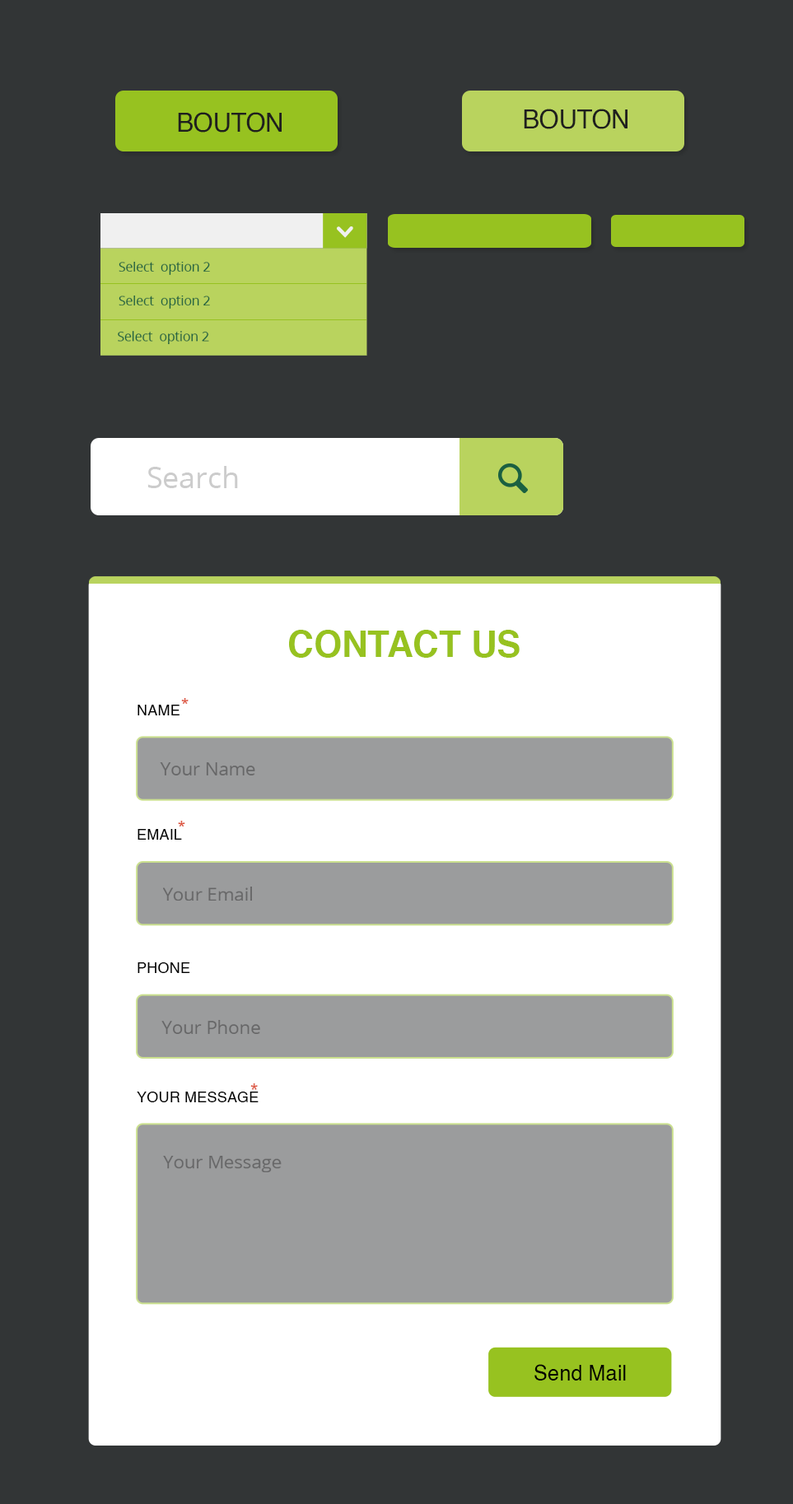
<style>
.page{position:relative;width:793px;height:1504px;background:#323536}
.page>*{position:absolute;margin:0}
.t1{font:25.1px "Helvetica";color:#1f1f1e}
.t2{font:12.9px "OpenSans";color:#1a6041}
.t3{font:29.6px "OpenSans";color:#cccccc}
.t4{font:36px "Helvetica-Bold";color:#97c220}
.t5{font:13.7px "OpenSans-Semibold";color:#dc513a;text-transform:uppercase}
.t6{font:15.1px "Helvetica";color:#000000;text-transform:uppercase}
.t7{font:18.2px "OpenSans";color:#666667}
.t8{font:15.1px "Helvetica";color:#010101;text-transform:uppercase}
.t9{font:20.9px "Helvetica";color:#000000}
</style>
<div class="page">
<p class="t1" style="left:178px;top:112px;width:104px;height:21px">BOUTON</p>
<p class="t1" style="left:524px;top:109px;width:103px;height:20px">BOUTON</p>
<p class="t2" style="left:119px;top:262px;width:91px;height:13px">Select  option 2</p>
<p class="t2" style="left:119px;top:296px;width:91px;height:13px">Select  option 2</p>
<p class="t2" style="left:118px;top:331px;width:91px;height:13px">Select  option 2</p>
<p class="t3" style="left:147px;top:466px;width:91px;height:22px">Search</p>
<p class="t4" style="left:289px;top:630px;width:230px;height:28px">CONTACT US</p>
<p class="t5" style="left:181px;top:698px;width:8px;height:6px">*</p>
<p class="t6" style="left:137px;top:705px;width:42px;height:10px">Name</p>
<p class="t7" style="left:160px;top:762px;width:95px;height:14px">Your Name</p>
<p class="t5" style="left:178px;top:821px;width:7px;height:6px">*</p>
<p class="t6" style="left:137px;top:829px;width:45px;height:11px">Email</p>
<p class="t7" style="left:163px;top:887px;width:89px;height:14px">Your Email</p>
<p class="t6" style="left:137px;top:962px;width:53px;height:11px">Phone</p>
<p class="t7" style="left:161px;top:1020px;width:99px;height:14px">Your Phone</p>
<p class="t5" style="left:250px;top:1083px;width:8px;height:7px">*</p>
<p class="t8" style="left:137px;top:1092px;width:122px;height:10px">Your Message</p>
<p class="t7" style="left:163px;top:1156px;width:119px;height:16px">Your Message</p>
<p class="t9" style="left:534px;top:1364px;width:92px;height:17px">Send Mail</p>
</div>
